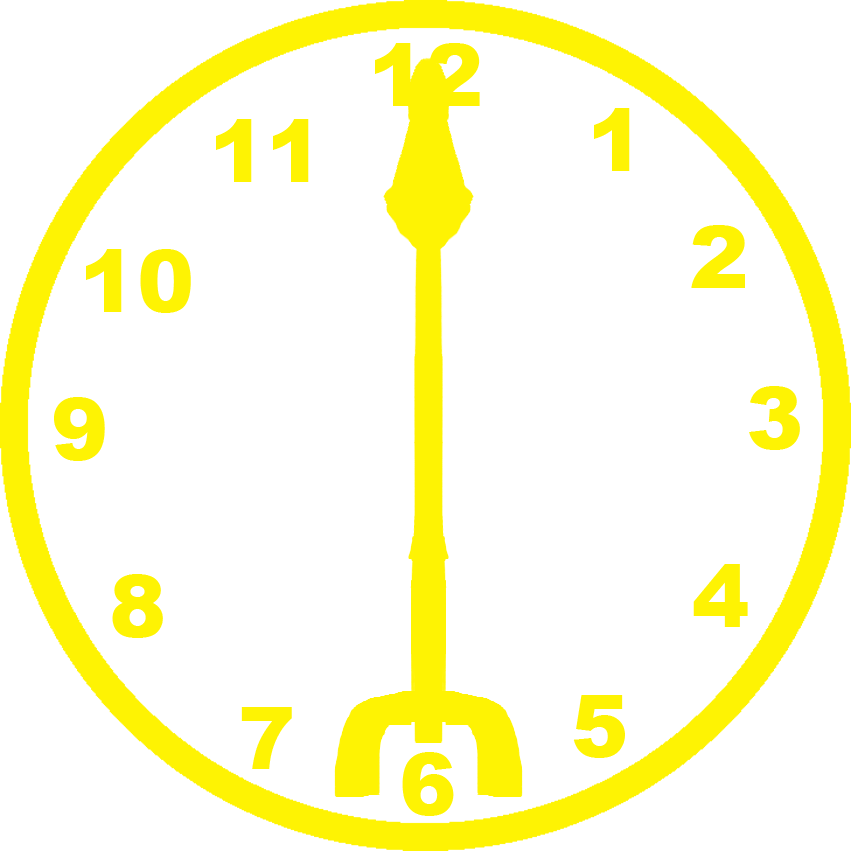
<style>
.page{position:relative;width:851px;height:851px;background:#ffffff}
.page>*{position:absolute;margin:0}
.t1{font:86px "Arial-Black";color:#fef303}
.t2{font:86px "Arial-Black";color:#fef303;scale:1.04 1}
</style>
<div class="page">
<p class="t1" style="left:375px;top:43px;width:105px;height:63px">12</p>
<p class="t1" style="left:594px;top:108px;width:36px;height:63px">1</p>
<p class="t1" style="left:216px;top:119px;width:93px;height:63px">11</p>
<p class="t2" style="left:691px;top:225px;width:54px;height:63px">2</p>
<p class="t1" style="left:86px;top:249px;width:105px;height:64px">10</p>
<p class="t1" style="left:749px;top:386px;width:51px;height:64px">3</p>
<p class="t1" style="left:54px;top:397px;width:51px;height:64px">9</p>
<p class="t1" style="left:693px;top:564px;width:55px;height:63px">4</p>
<p class="t1" style="left:112px;top:574px;width:51px;height:64px">8</p>
<p class="t1" style="left:573px;top:695px;width:52px;height:63px">5</p>
<p class="t1" style="left:241px;top:707px;width:51px;height:62px">7</p>
<p class="t1" style="left:402px;top:752px;width:52px;height:64px">6</p>
</div>
